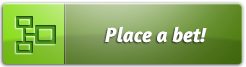
<style>
.page{position:relative;width:246px;height:67px}
.page>*{position:absolute;margin:0}
.t1{font:21px "Amaranth-BoldItalic";color:#ffffff}
</style>
<div class="page">
<p class="t1" style="left:105px;top:26px;width:102px;height:17px">Place a bet!</p>
</div>
